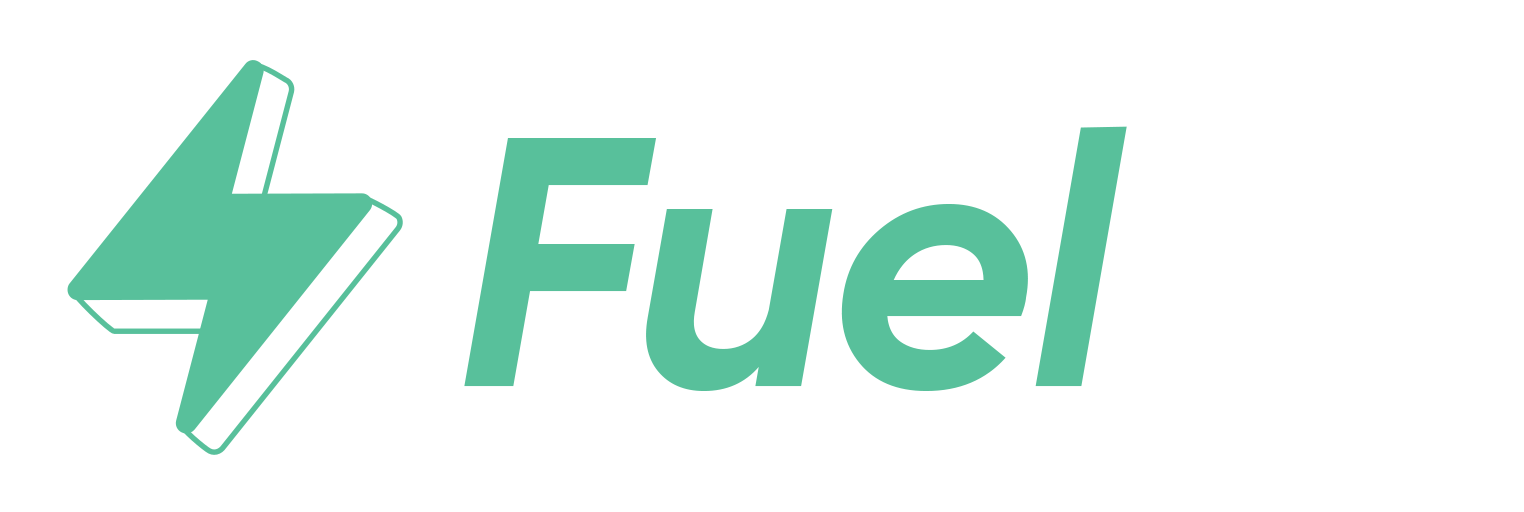
<style>
.page{position:relative;width:1524px;height:512px;background:#ffffff}
.page>*{position:absolute;margin:0}
.t1{font:353.9px "Gilroy-BoldItalic";letter-spacing:-0.02em;color:#58c09b}
</style>
<div class="page">
<p class="t1" style="left:464px;top:126px;width:663px;height:265px">Fuel</p>
</div>
